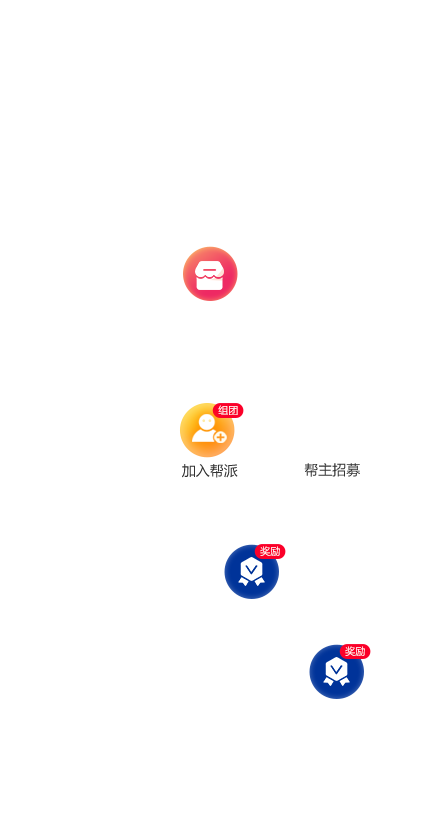
<style>
.page{position:relative;width:445px;height:835px;background:#ffffff}
.page>*{position:absolute;margin:0}
.t1{font:10px "MicrosoftYaHeiUI";letter-spacing:0.01em;color:#ffffff}
.t2{font:14px "MicrosoftYaHeiUI";color:#333333}
.t3{font:10px "MicrosoftYaHeiUI";letter-spacing:0.01em}
</style>
<div class="page">
<p class="t1" style="left:218px;top:405px;width:20px;height:10px">组团</p>
<p class="t2" style="left:182px;top:464px;width:56px;height:14px">加入帮派</p>
<p class="t2" style="left:304px;top:463px;width:56px;height:14px">帮主招募</p>
<p class="t3" style="left:260px;top:546px;width:20px;height:10px">奖励</p>
<p class="t3" style="left:345px;top:646px;width:20px;height:10px">奖励</p>
</div>
